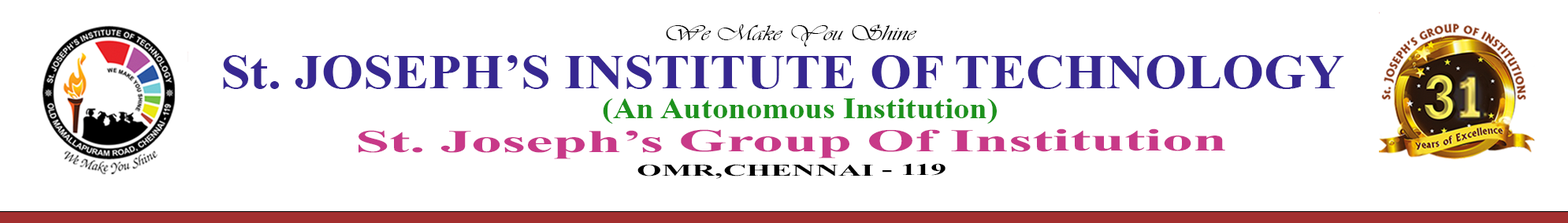
<style>
.page{position:relative;width:1568px;height:223px;background:#ffffff}
.page>*{position:absolute;margin:0}
.t1{font:22.5px "Vivaldii";color:#000000;scale:1.21 1}
.t2{font:48.5px "TimesNewRomanPS-BoldMT";color:#372891;scale:1.1 1}
.t3{font:29px "TimesNewRomanPS-BoldMT";color:#1d921d;scale:1.1 1}
.t4{font:31.8px "TimesNewRomanPS-BoldMT";color:#c83988;scale:1.93 1}
.t5{font:16.5px "TimesNewRomanPS-BoldMT";color:#000000;scale:1.93 1}
</style>
<div class="page">
<p class="t1" style="left:666px;top:24px;width:251px;height:23px">We Make You Shine</p>
<p class="t2" style="left:223px;top:55px;width:1121px;height:34px">St. JOSEPH’S INSTITUTE OF TECHNOLOGY</p>
<p class="t3" style="left:603px;top:98px;width:394px;height:26px">(An Autonomous Institution)</p>
<p class="t4" style="left:359px;top:128px;width:866px;height:31px">St. Joseph’s Group Of Institution</p>
<p class="t5" style="left:637px;top:163px;width:309px;height:16px">OMR,CHENNAI - 119</p>
</div>
